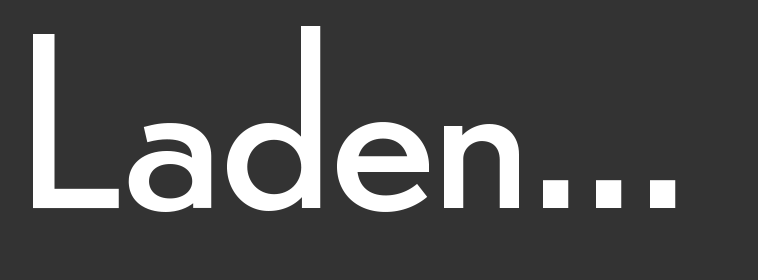
<style>
.page{position:relative;width:758px;height:280px;background:#333333}
.page>*{position:absolute;margin:0}
.t1{font:233.7px "DunbarLow-Book";color:#ffffff}
</style>
<div class="page">
<p class="t1" style="left:33px;top:26px;width:643px;height:186px">Laden...</p>
</div>
